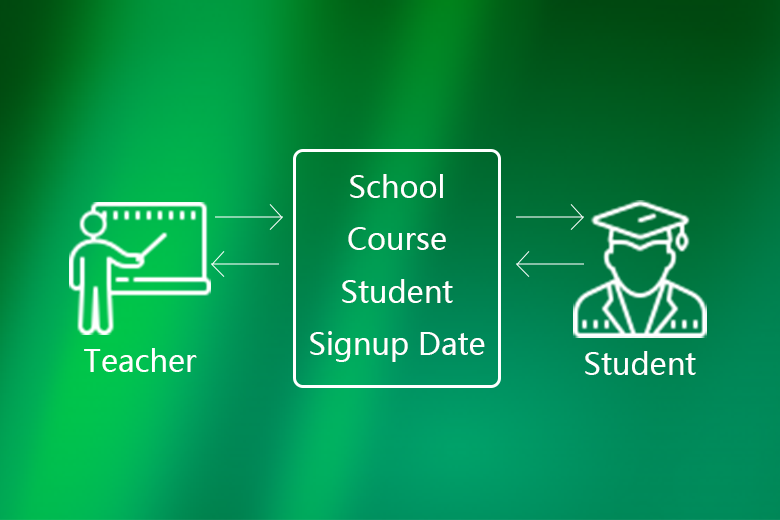
<style>
.page{position:relative;width:780px;height:520px}
.page>*{position:absolute;margin:0}
.t1{font:30px "MicrosoftYaHei";color:#ffffff}
</style>
<div class="page">
<p class="t1" style="left:310px;top:174px;width:175px;height:188px;text-align:center">School<br>Course<br>Student<br>Signup Date</p>
<p class="t1" style="left:84px;top:348px;width:113px;height:24px">Teacher</p>
<p class="t1" style="left:585px;top:351px;width:111px;height:24px">Student</p>
</div>
